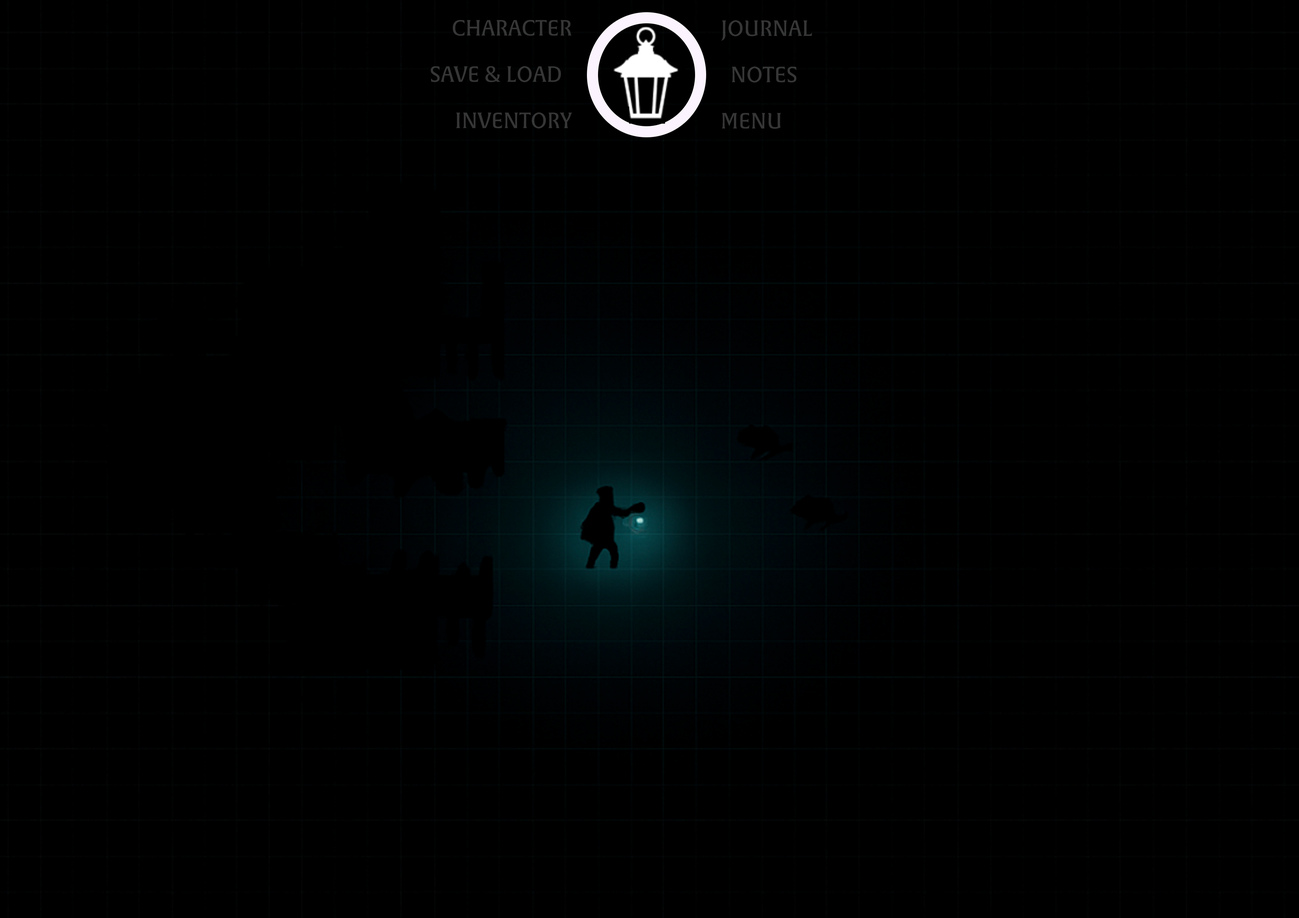
<style>
.page{position:relative;width:1299px;height:918px;background:#000000}
.page>*{position:absolute;margin:0}
.t1{font:21.6px/46.3px "AlverataIrregular";color:#363636}
</style>
<div class="page">
<p class="t1" style="left:431px;top:20px;width:141px;height:108px;text-align:right">CHARACTER<br>SAVE &amp; LOAD  <br>INVENTORY</p>
<p class="t1" style="left:721px;top:20px;width:91px;height:109px">JOURNAL<br>  NOTES<br>MENU</p>
</div>
